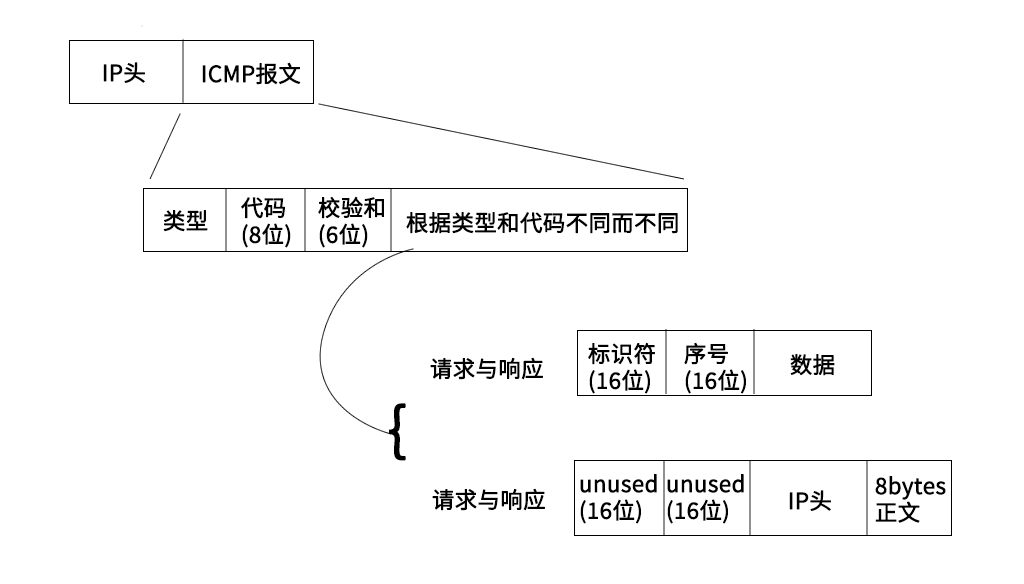
<style>
.page{position:relative;width:1024px;height:584px;background:#ffffff}
.page>*{position:absolute;margin:0}
.t1{font:22.2px "SourceHanSansCN-Normal";color:#000000;font-weight:bold}
.t2{font:57.7px "SourceHanSansCN-Normal";color:#000000;font-weight:bold}
</style>
<div class="page">
<p class="t1" style="left:103px;top:62px;width:42px;height:21px">IP头</p>
<p class="t1" style="left:202px;top:62px;width:99px;height:23px">ICMP报文</p>
<p class="t1" style="left:241px;top:197px;width:50px;height:51px">代码<br>(8位)</p>
<p class="t1" style="left:318px;top:196px;width:66px;height:52px">校验和<br>(6位)</p>
<p class="t1" style="left:163px;top:210px;width:45px;height:22px">类型</p>
<p class="t1" style="left:406px;top:212px;width:272px;height:22px">根据类型和代码不同而不同</p>
<p class="t1" style="left:588px;top:342px;width:67px;height:52px">标识符<br>(16位)</p>
<p class="t1" style="left:684px;top:342px;width:62px;height:52px">序号<br>(16位)</p>
<p class="t1" style="left:430px;top:357px;width:113px;height:23px">请求与响应</p>
<p class="t1" style="left:790px;top:354px;width:45px;height:22px">数据</p>
<p class="t2" style="left:389px;top:403px;width:17px;height:58px">{</p>
<p class="t1" style="left:580px;top:474px;width:77px;height:50px">unused<br>(16位)</p>
<p class="t1" style="left:667px;top:474px;width:77px;height:50px">unused<br>(16位)</p>
<p class="t1" style="left:875px;top:476px;width:71px;height:47px">8bytes<br>正文</p>
<p class="t1" style="left:432px;top:488px;width:113px;height:23px">请求与响应</p>
<p class="t1" style="left:789px;top:490px;width:42px;height:21px">IP头</p>
</div>
